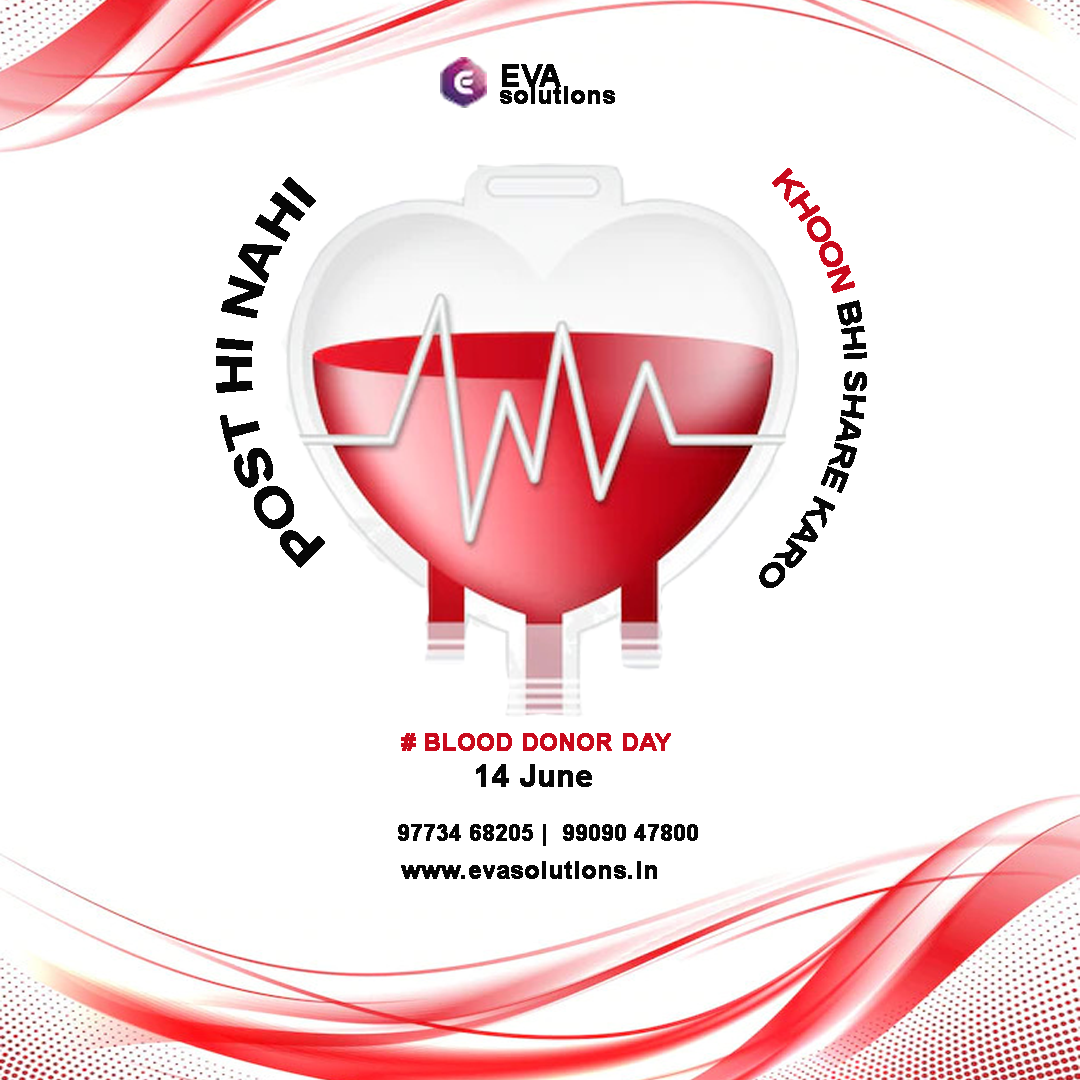
<style>
.page{position:relative;width:1080px;height:1080px;background:#ffffff}
.page>*{position:absolute;margin:0}
.t1{font:30px "Arial-BoldMT";color:#070707}
.t2{font:30px "Arial-BoldMT";color:#c90a1c}
.t3{font:48px "Arial-BoldMT";color:#070707}
.t4{font:24px "Arial-BoldMT";color:#c90a1c;font-weight:bold}
.t5{font:30px "Arial-BoldMT";color:#070707;font-weight:bold}
.t6{font:22px "Arial-BoldMT";color:#060606;font-weight:bold}
.t7{font:24px "Arial-BoldMT";color:#060606;font-weight:bold}
</style>
<div class="page">
<p class="t1" style="left:759px;top:168px;width:108px;height:420px;rotate:92deg"><span class="t2">KHOON</span> BHI SHARE KARO</p>
<p class="t3" style="left:216px;top:177px;width:109px;height:391px;rotate:-92deg">POST HI NAHI</p>
<p class="t4" style="left:401px;top:733px;width:270px;height:18px"># BLOOD DONOR DAY</p>
<p class="t5" style="left:476px;top:764px;width:116px;height:23px">14 June</p>
<p class="t6" style="left:398px;top:824px;width:300px;height:22px">97734 68205 |  99090 47800</p>
<p class="t7" style="left:401px;top:861px;width:256px;height:18px">www.evasolutions.in</p>
</div>
